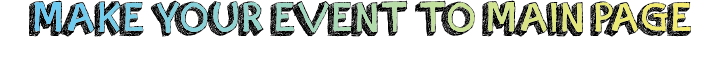
<style>
.page{position:relative;width:721px;height:60px;background:#ffffff}
.page>*{position:absolute;margin:0}
.t1{font:48px "orangejuice";color:#000000}
</style>
<div class="page">
<p class="t1" style="left:29px;top:0px;width:662px;height:37px">MAKE YOUR EVENT TO MAIN PAGE</p>
</div>
